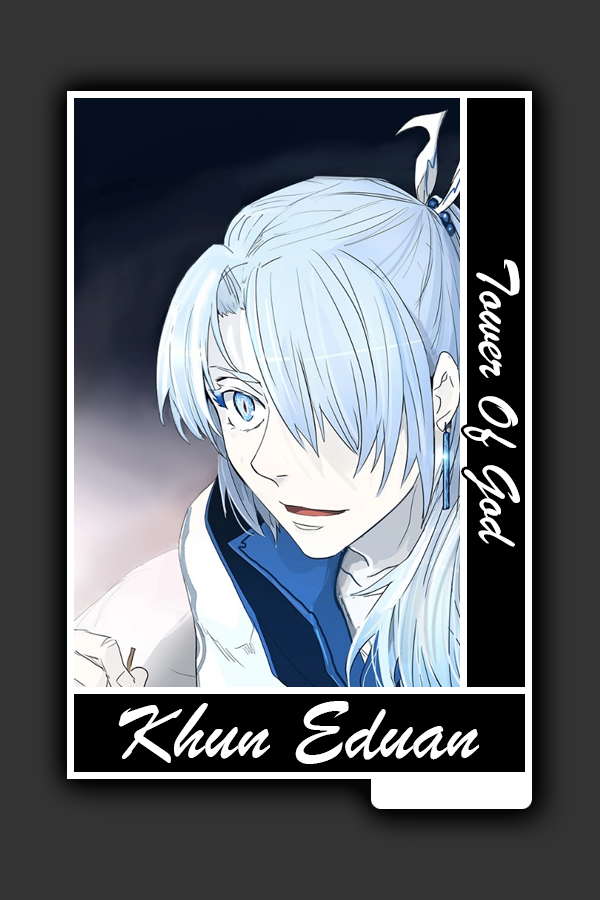
<style>
.page{position:relative;width:600px;height:900px;background:#333333}
.page>*{position:absolute;margin:0}
.t1{font:61.5px "BrushScriptMT";color:#ffffff}
.t2{font:84.8px "BrushScriptMT";color:#ffffff}
</style>
<div class="page">
<p class="t1" style="left:463px;top:259px;width:57px;height:288px;rotate:90deg">Tower Of God</p>
<p class="t2" style="left:118px;top:701px;width:361px;height:63px">Khun Eduan</p>
</div>
